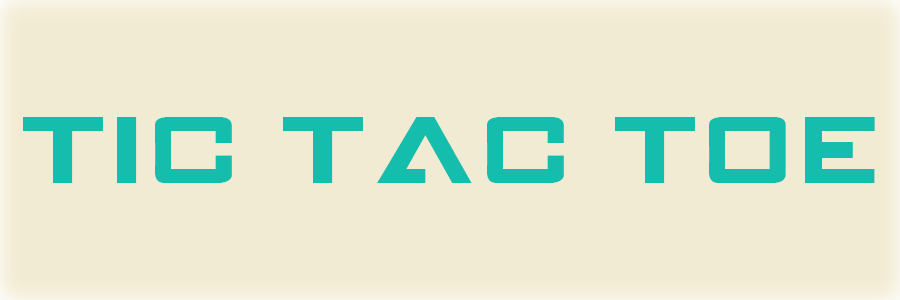
<style>
.page{position:relative;width:900px;height:300px;background:#f2ebd3}
.page>*{position:absolute;margin:0}
.t1{font:82px "GAMECUBENDualSet";color:#14bdac}
</style>
<div class="page">
<p class="t1" style="left:23px;top:117px;width:852px;height:66px">TIC TAC TOE</p>
</div>
